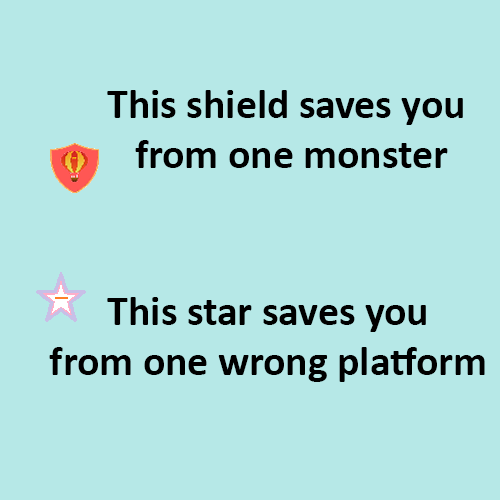
<style>
.page{position:relative;width:500px;height:500px;background:#b6e8e7}
.page>*{position:absolute;margin:0}
.t1{font:41.7px "Calibri-Bold";color:#000000}
</style>
<div class="page">
<p class="t1" style="left:107px;top:90px;width:356px;height:78px;text-align:center">This shield saves you <br>from one monster</p>
<p class="t1" style="left:49px;top:297px;width:436px;height:85px;text-align:center">This star saves you<br>from one wrong platform</p>
</div>
